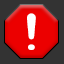
<style>
.page{position:relative;width:64px;height:64px;background:#333333}
.page>*{position:absolute;margin:0}
.t1{font:55px "CourierNewPS-BoldMT";color:#ffffff}
</style>
<div class="page">
<p class="t1" style="left:27px;top:13px;width:9px;height:37px">!</p>
</div>
